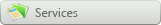
<style>
.page{position:relative;width:161px;height:25px}
.page>*{position:absolute;margin:0}
.t1{font:12px "SegoeUI";color:#706d6d}
</style>
<div class="page">
<p class="t1" style="left:35px;top:8px;width:43px;height:9px">Services</p>
</div>
